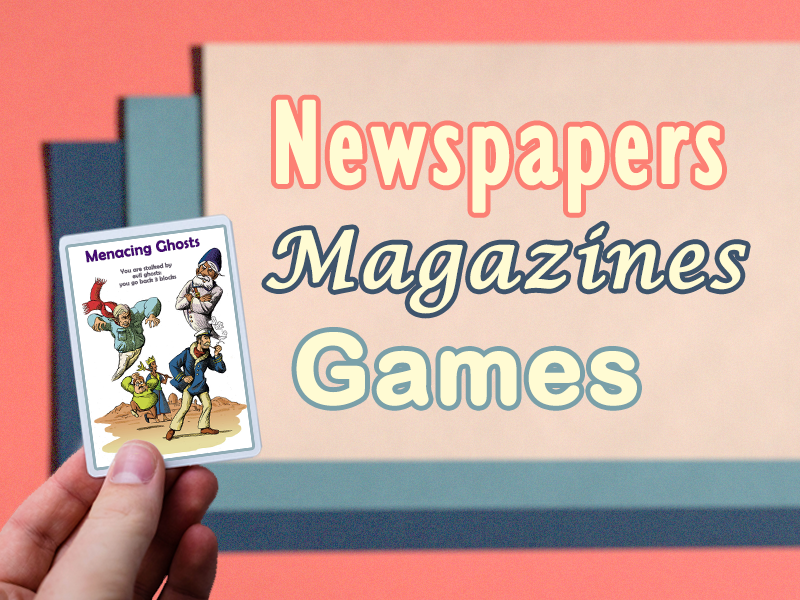
<style>
.page{position:relative;width:800px;height:600px}
.page>*{position:absolute;margin:0}
.t1{font:120.8px "GillSansMT-Condensed";letter-spacing:0.025em;color:#fffbd3;font-weight:bold}
.t2{font:77.1px "LucidaCalligraphy-Italic";letter-spacing:0.025em;color:#fffbd3;font-weight:bold}
.t3{font:15.8px "BerlinSansFB-Reg";color:#470b76;font-weight:bold}
.t4{font:6.2px/6.2px "BerlinSansFB-Reg";color:#696170;font-weight:bold}
.t5{font:95.8px "ArialRoundedMTBold";letter-spacing:0.025em;color:#fffbd3;font-weight:bold}
</style>
<div class="page">
<p class="t1" style="left:276px;top:99px;width:446px;height:114px">Newspapers</p>
<p class="t2" style="left:266px;top:225px;width:480px;height:89px">Magazines</p>
<p class="t3" style="left:85px;top:237px;width:115px;height:26px;rotate:-8deg">Menacing Ghosts</p>
<p class="t4" style="left:119px;top:262px;width:58px;height:26px;text-align:center;rotate:-8deg">You are stalked by<br>evil ghosts:<br>you go back 3 blocks</p>
<p class="t5" style="left:296px;top:332px;width:341px;height:74px">Games</p>
</div>
